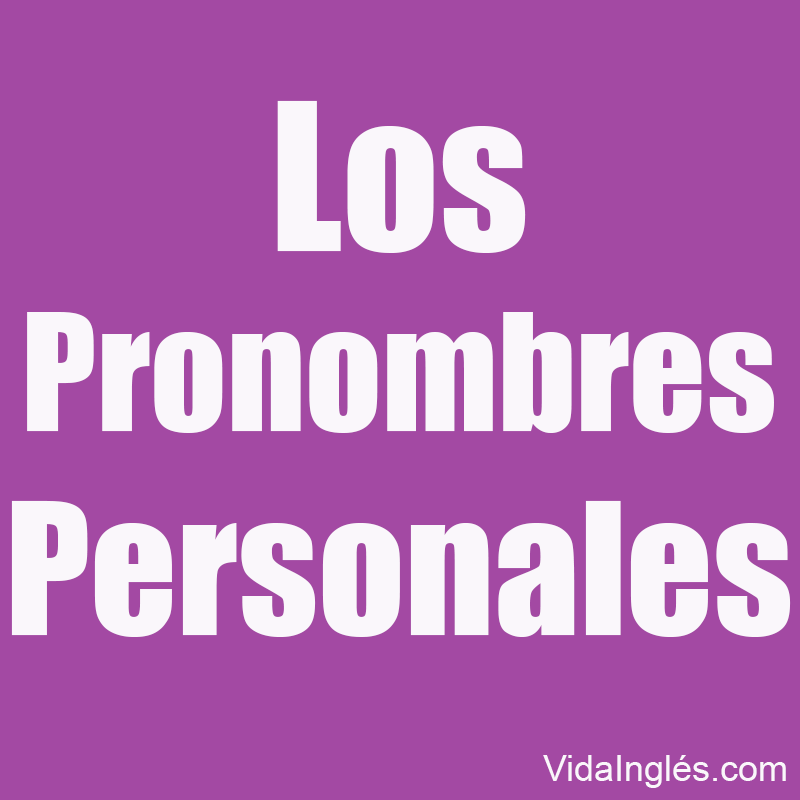
<style>
.page{position:relative;width:800px;height:800px;background:#a349a3}
.page>*{position:absolute;margin:0}
.t1{font:150px "Impact";color:#fbf7fb}
.t2{font:190px "Impact";color:#fbf7fb}
.t3{font:170px "Impact";color:#fbf7fb}
.t4{font:36px "ArialMT";color:#fbf7fb}
</style>
<div class="page">
<p class="t1" style="left:11px;top:100px;width:780px;height:537px;text-align:center"><span class="t2">Los<br></span>Pronombres<br><span class="t3">Personales</span></p>
<p class="t4" style="left:543px;top:755px;width:243px;height:33px">VidaInglés.com</p>
</div>
